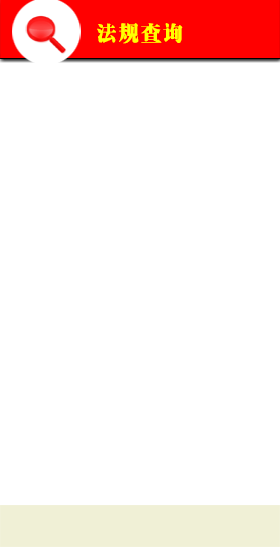
<style>
.page{position:relative;width:280px;height:547px;background:#ffffff}
.page>*{position:absolute;margin:0}
.t1{font:22.2px "RS_CuBiao";letter-spacing:0.05em;color:#ffff00;scale:0.94 1}
</style>
<div class="page">
<p class="t1" style="left:97px;top:23px;width:86px;height:21px">法规查询</p>
</div>
